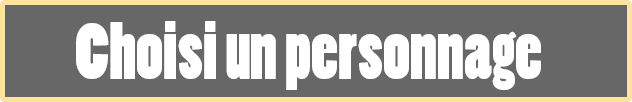
<style>
.page{position:relative;width:632px;height:102px;background:#676768}
.page>*{position:absolute;margin:0}
.t1{font:75px "PoplarStd";color:#ffffff;scale:0.96 1}
</style>
<div class="page">
<p class="t1" style="left:76px;top:21px;width:465px;height:69px">Choisi un personnage</p>
</div>
